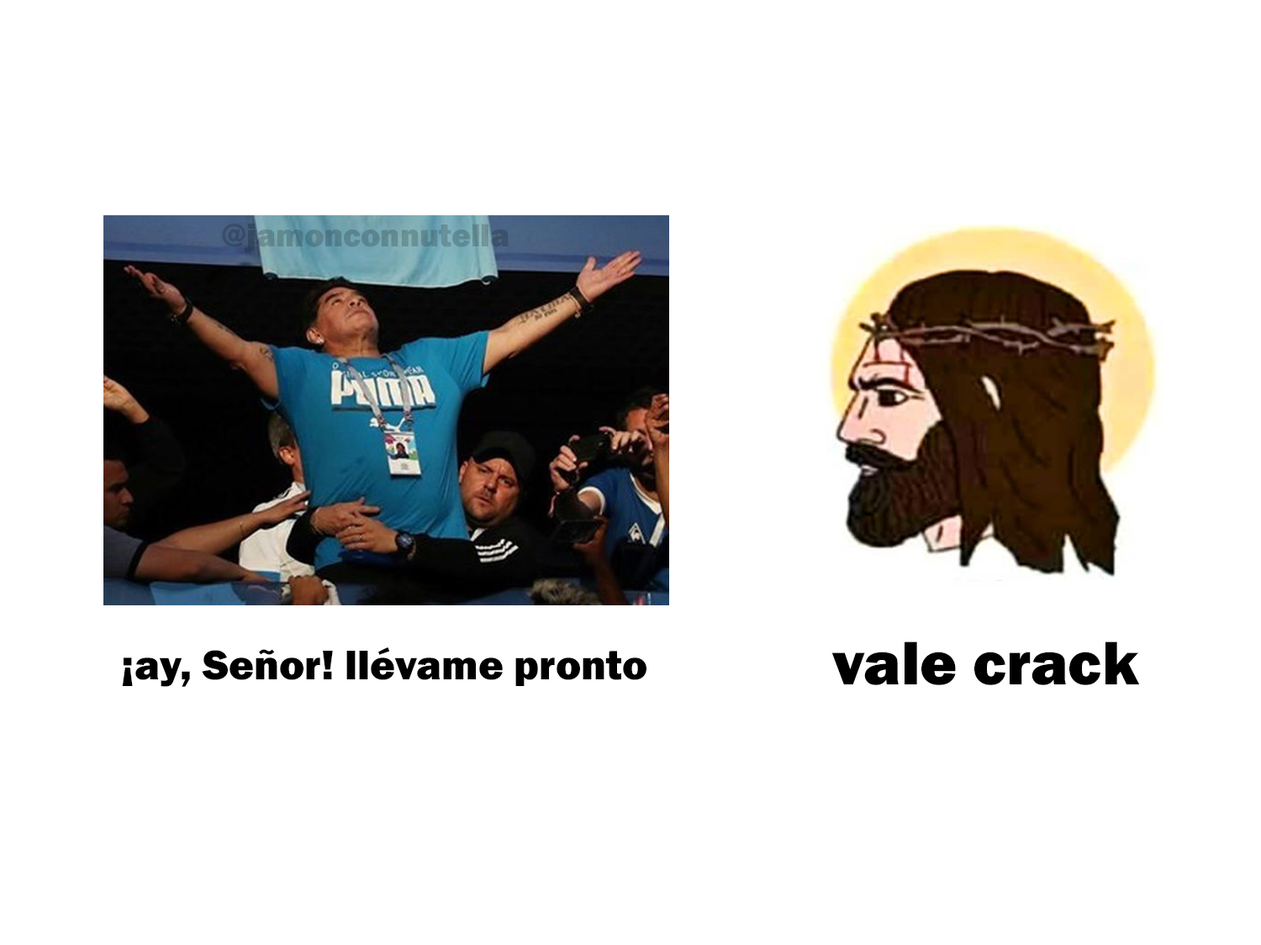
<style>
.page{position:relative;width:1261px;height:945px;background:#ffffff}
.page>*{position:absolute;margin:0}
.t1{font:33.2px "FranklinGothic-Heavy";color:#5c858f}
.t2{font:63.7px "FranklinGothic-Heavy";color:#000000}
.t3{font:42.9px "FranklinGothic-Heavy";color:#000000}
</style>
<div class="page">
<p class="t1" style="left:222px;top:224px;width:287px;height:28px">@jamonconnutella</p>
<p class="t2" style="left:832px;top:642px;width:308px;height:43px">vale crack</p>
<p class="t3" style="left:122px;top:647px;width:525px;height:40px">¡ay, Señor! llévame pronto</p>
</div>
